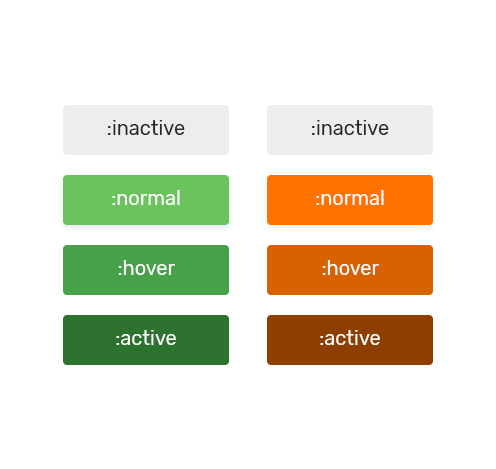
<style>
.page{position:relative;width:496px;height:469px;background:#ffffff}
.page>*{position:absolute;margin:0}
.t1{font:20px "Rubik-Regular";color:#272727}
.t2{font:20px "Rubik-Regular";color:#ffffff}
</style>
<div class="page">
<p class="t1" style="left:108px;top:120px;width:77px;height:15px">:inactive</p>
<p class="t1" style="left:312px;top:120px;width:77px;height:15px">:inactive</p>
<p class="t2" style="left:112px;top:190px;width:68px;height:15px">:normal</p>
<p class="t2" style="left:316px;top:190px;width:68px;height:15px">:normal</p>
<p class="t2" style="left:118px;top:260px;width:57px;height:15px">:hover</p>
<p class="t2" style="left:322px;top:260px;width:57px;height:15px">:hover</p>
<p class="t2" style="left:116px;top:330px;width:60px;height:15px">:active</p>
<p class="t2" style="left:320px;top:330px;width:60px;height:15px">:active</p>
</div>
